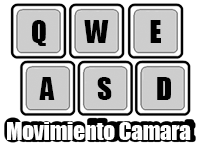
<style>
.page{position:relative;width:200px;height:144px;background:#ffffff}
.page>*{position:absolute;margin:0}
.t1{font:29.3px "Impact";color:#000000}
.t2{font:22.5px "Impact";color:#ffffff}
</style>
<div class="page">
<p class="t1" style="left:32px;top:20px;width:14px;height:26px">Q</p>
<p class="t1" style="left:84px;top:20px;width:25px;height:23px">W</p>
<p class="t1" style="left:150px;top:20px;width:11px;height:23px">E</p>
<p class="t1" style="left:39px;top:77px;width:16px;height:23px">A</p>
<p class="t1" style="left:97px;top:77px;width:15px;height:23px">S</p>
<p class="t1" style="left:157px;top:77px;width:14px;height:23px">D</p>
<p class="t2" style="left:7px;top:122px;width:184px;height:18px">Movimiento Camara</p>
</div>
